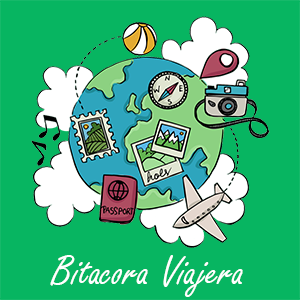
<style>
.page{position:relative;width:300px;height:300px;background:#07b561}
.page>*{position:absolute;margin:0}
.t1{font:45px "FreestyleScript-Regular";color:#ffffff}
</style>
<div class="page">
<p class="t1" style="left:50px;top:255px;width:193px;height:42px">Bitacora Viajera</p>
</div>
